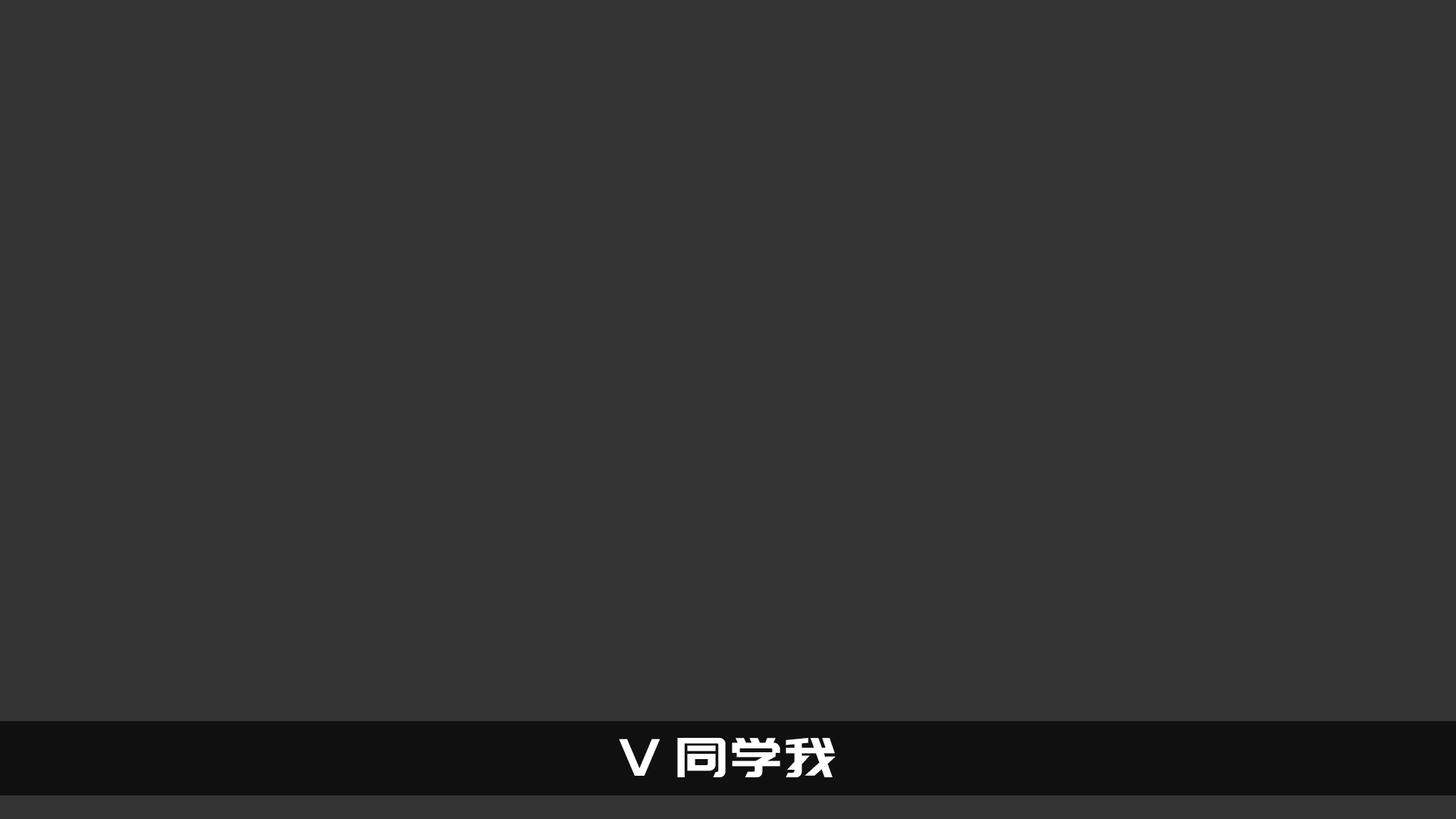
<style>
.page{position:relative;width:1456px;height:819px;background:#333333}
.page>*{position:absolute;margin:0}
.t1{font:54.6px "PangMenZhengDao-3";color:#ffffff}
</style>
<div class="page">
<p class="t1" style="left:619px;top:738px;width:217px;height:39px">V同学我</p>
</div>
